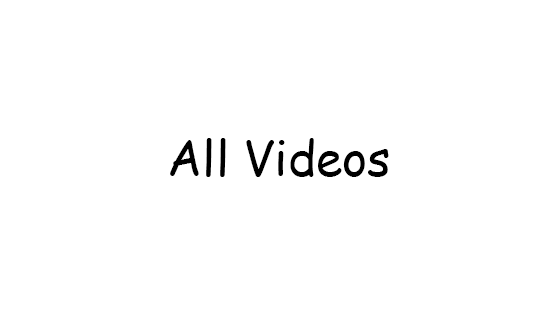
<style>
.page{position:relative;width:560px;height:315px;background:#ffffff}
.page>*{position:absolute;margin:0}
.t1{font:48px "ComicSansMS";color:#000000}
</style>
<div class="page">
<p class="t1" style="left:170px;top:138px;width:219px;height:39px">All Videos</p>
</div>
